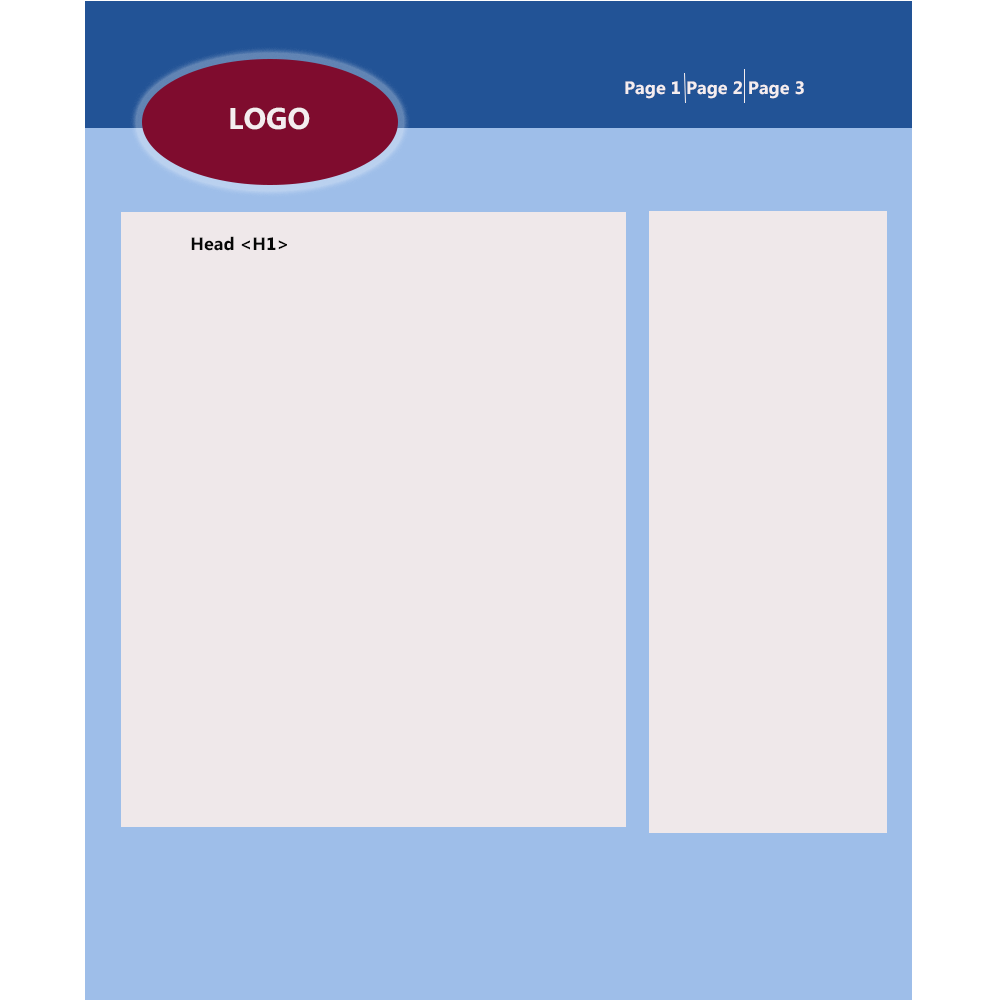
<style>
.page{position:relative;width:1000px;height:1000px;background:#efe8ea}
.page>*{position:absolute;margin:0}
.t1{font:18px "MicrosoftPhagsPa-Bold";color:#f4edef}
.t2{font:30px "MicrosoftPhagsPa-Bold";color:#f4edef}
.t3{font:18px "MicrosoftPhagsPa-Bold";color:#060606}
</style>
<div class="page">
<p class="t1" style="left:625px;top:81px;width:179px;height:18px">Page 1 Page 2 Page 3</p>
<p class="t2" style="left:230px;top:107px;width:80px;height:23px">LOGO</p>
<p class="t3" style="left:191px;top:236px;width:96px;height:15px">Head &lt;H1&gt;</p>
</div>
